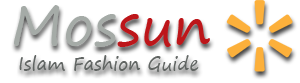
<style>
.page{position:relative;width:300px;height:83px;background:#ffffff}
.page>*{position:absolute;margin:0}
.t1{font:55px "SegoePrint";color:#a5aba7}
.t2{font:55px "SegoePrint";color:#bd161a}
.t3{font:18px "SegoePrint";color:#616563}
</style>
<div class="page">
<p class="t1" style="left:14px;top:5px;width:196px;height:42px">Mos<span class="t2">sun</span></p>
<p class="t3" style="left:19px;top:55px;width:180px;height:17px">Islam Fashion Guide</p>
</div>
